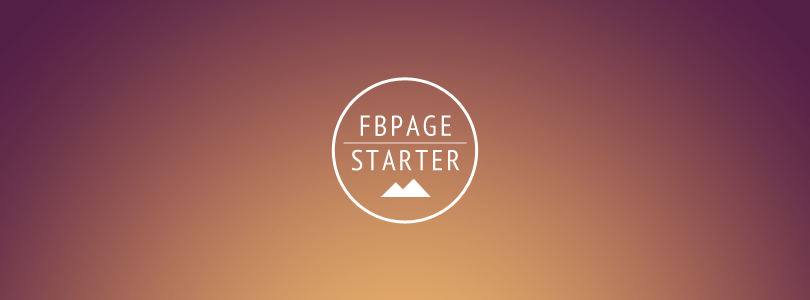
<style>
.page{position:relative;width:810px;height:300px}
.page>*{position:absolute;margin:0}
.t1{font:28.8px "PTSans-Narrow";letter-spacing:0.1em;color:#ffffff}
</style>
<div class="page">
<p class="t1" style="left:351px;top:115px;width:109px;height:56px;text-align:center">FBPAGE<br>STARTER</p>
</div>
